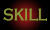
<style>
.page{position:relative;width:50px;height:30px;background:#000000}
.page>*{position:absolute;margin:0}
.t1{font:20.3px "CopperplateGothic-Light";letter-spacing:-0.01em;color:#8a9a3a;font-weight:bold;scale:0.81 1}
</style>
<div class="page">
<p class="t1" style="left:3px;top:8px;width:44px;height:13px">skill</p>
</div>
